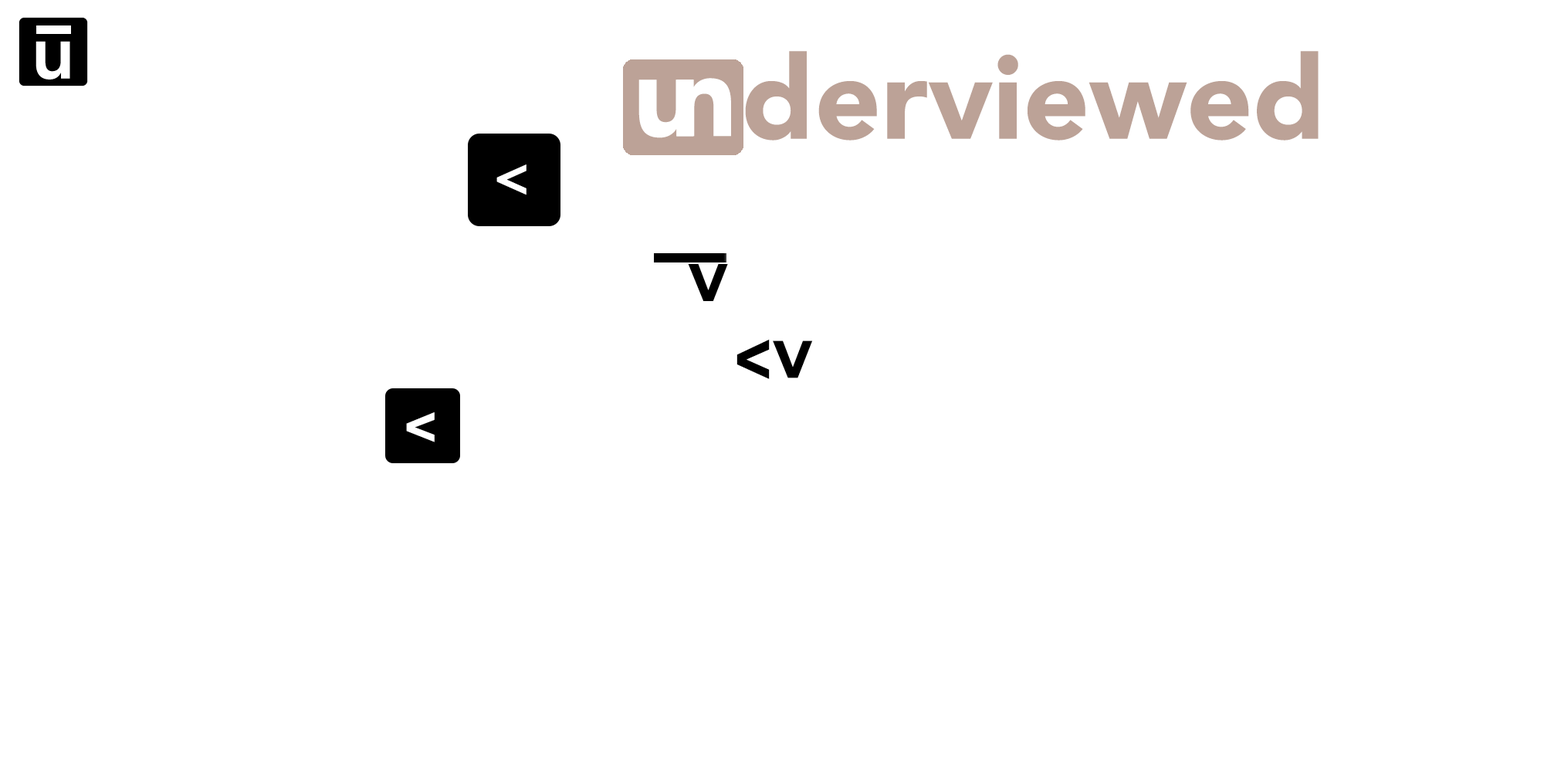
<style>
.page{position:relative;width:1544px;height:772px;background:#ffffff}
.page>*{position:absolute;margin:0}
.t1{font:115.8px "Avenir-Black";letter-spacing:0.001em;color:#bca297}
.t2{font:115.8px "Avenir-Black";letter-spacing:0.001em;color:#ffffff}
.t3{font:57.9px "Avenir-Heavy";letter-spacing:0.001em;color:#ffffff}
.t4{font:77.2px "Avenir-Heavy";letter-spacing:0.001em;color:#000000}
.t5{font:66.7px "Avenir-Heavy";letter-spacing:0.001em;color:#000000;scale:1.16 1}
</style>
<div class="page">
<p class="t1" style="left:745px;top:51px;width:574px;height:90px">derviewed</p>
<p class="t2" style="left:676px;top:78px;width:55px;height:59px">n</p>
<p class="t2" style="left:639px;top:80px;width:55px;height:58px">u</p>
<p class="t3" style="left:496px;top:164px;width:31px;height:31px">&lt;</p>
<p class="t4" style="left:688px;top:264px;width:40px;height:37px">v</p>
<p class="t5" style="left:737px;top:339px;width:33px;height:40px;rotate:90deg">v</p>
<p class="t4" style="left:773px;top:341px;width:40px;height:37px">v</p>
<p class="t3" style="left:406px;top:412px;width:29px;height:30px;rotate:90deg">v</p>
</div>
